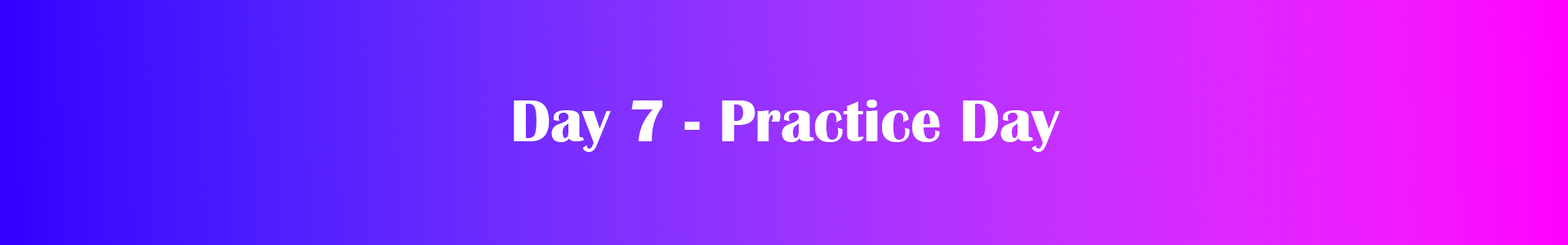
<style>
.page{position:relative;width:1568px;height:245px}
.page>*{position:absolute;margin:0}
.t1{font:61.2px "BritannicBold";color:#ffffff}
</style>
<div class="page">
<p class="t1" style="left:514px;top:100px;width:546px;height:52px">Day 7 - Practice Day</p>
</div>
